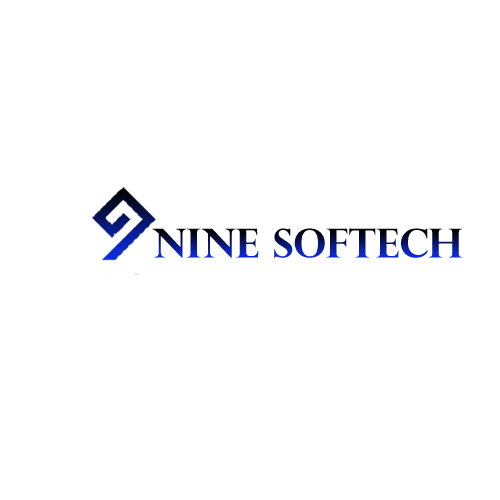
<style>
.page{position:relative;width:500px;height:500px;background:#ffffff}
.page>*{position:absolute;margin:0}
.t1{font:40px "PerpetuaTitlingMT-Bold"}
</style>
<div class="page">
<p class="t1" style="left:152px;top:228px;width:311px;height:30px">nine softech</p>
</div>
